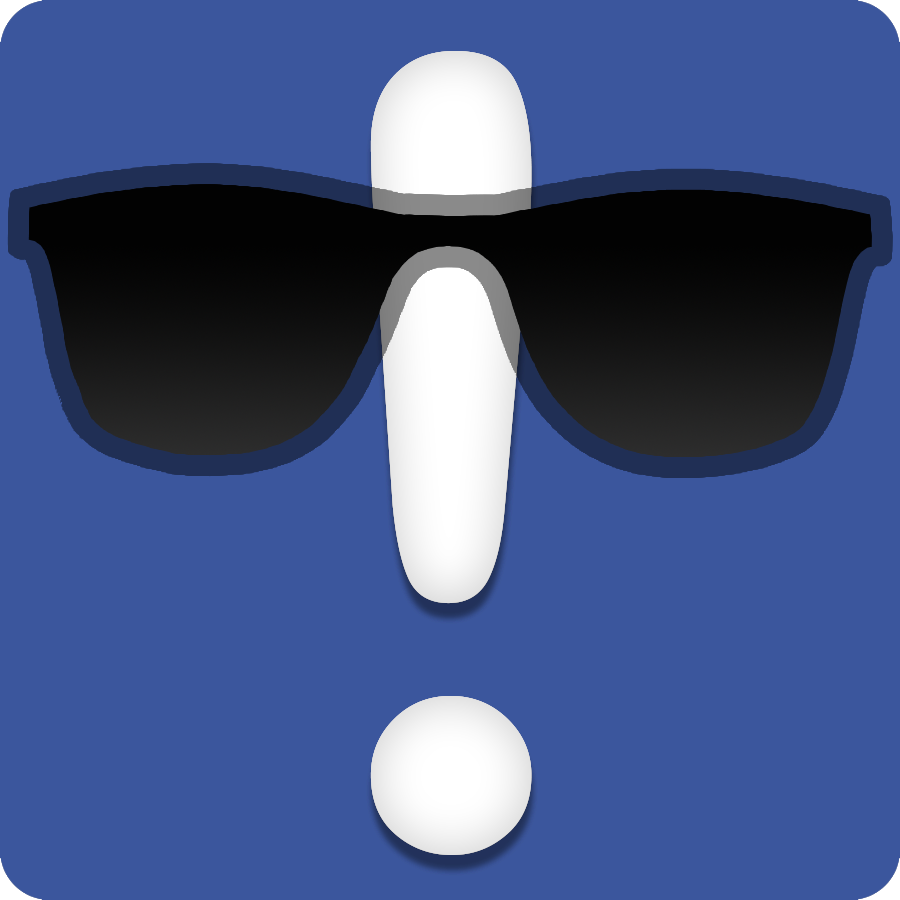
<style>
.page{position:relative;width:900px;height:900px;background:#3b569d}
.page>*{position:absolute;margin:0}
.t1{font:1087.9px "ArialRoundedMTBold";color:#ffffff}
</style>
<div class="page">
<p class="t1" style="left:370px;top:51px;width:162px;height:804px">!</p>
</div>
